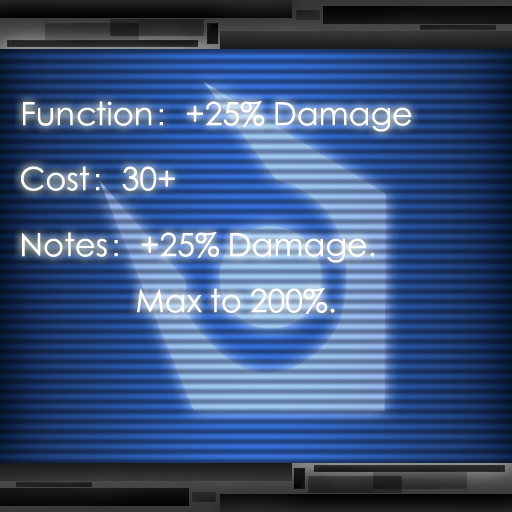
<style>
.page{position:relative;width:512px;height:512px}
.page>*{position:absolute;margin:0}
.t1{font:32px "STXihei";color:#ffffff}
</style>
<div class="page">
<p class="t1" style="left:23px;top:101px;width:389px;height:31px">Function：+25% Damage</p>
<p class="t1" style="left:21px;top:166px;width:154px;height:25px">Cost：30+</p>
<p class="t1" style="left:22px;top:232px;width:353px;height:82px">Notes：+25% Damage.<br>    Max to 200%.</p>
</div>
